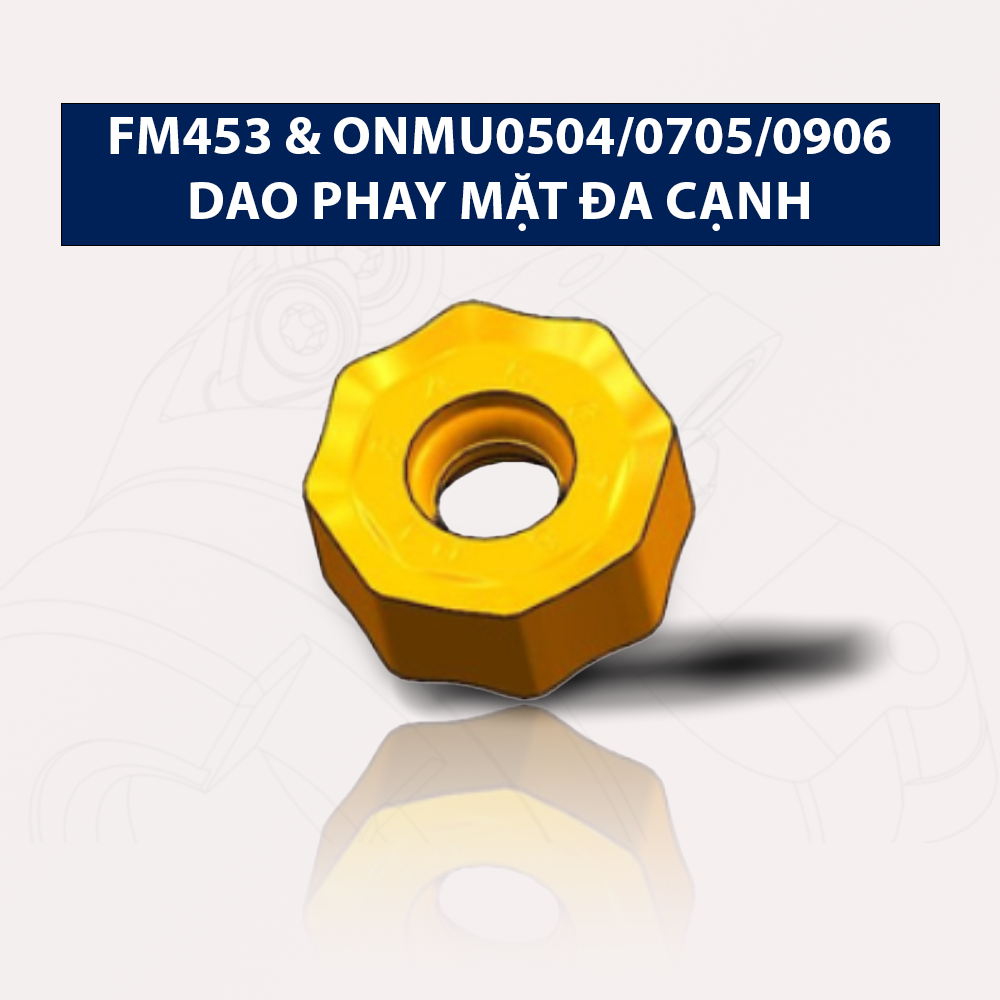
<style>
.page{position:relative;width:1000px;height:1000px;background:#f5efef}
.page>*{position:absolute;margin:0}
.t1{font:54.3px "MyriadPro-Bold";color:#ffffff;text-transform:uppercase}
</style>
<div class="page">
<p class="t1" style="left:110px;top:117px;width:781px;height:114px;text-align:center">FM453 &amp; ONMU0504/0705/0906<br>Dao Phay Mặt Đa Cạnh</p>
</div>
